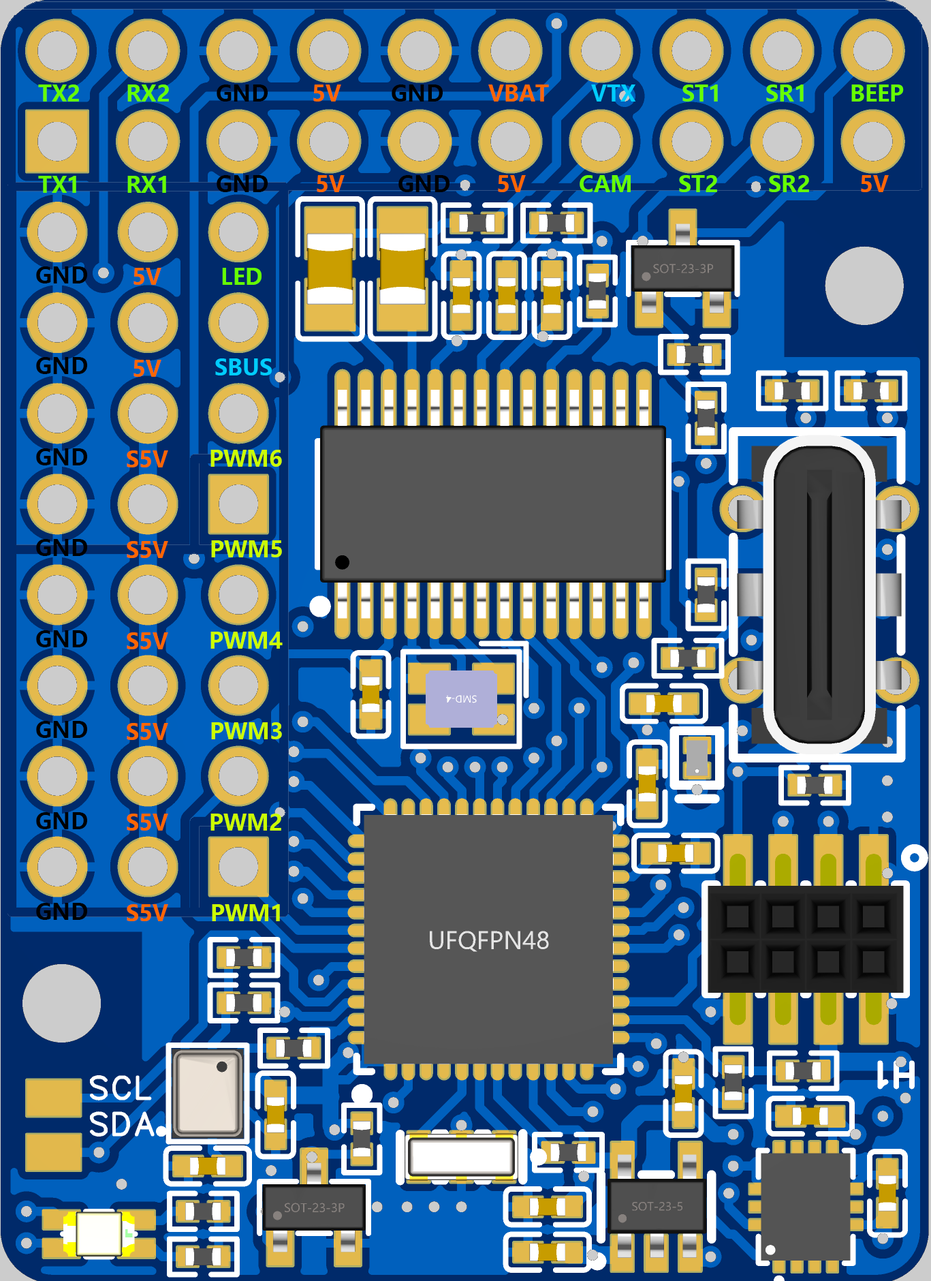
<style>
.page{position:relative;width:931px;height:1281px}
.page>*{position:absolute;margin:0}
.t1{font:21.8px "MicrosoftYaHei-Bold";color:#66ff00}
.t2{font:21.8px "MicrosoftYaHei-Bold";color:#000000}
.t3{font:21.8px "MicrosoftYaHei-Bold";color:#ff6600}
.t4{font:21.8px "MicrosoftYaHei-Bold";color:#00ccff}
.t5{font:21.8px "MicrosoftYaHei-Bold";color:#ccff00}
</style>
<div class="page">
<p class="t1" style="left:38px;top:84px;width:41px;height:17px">TX2</p>
<p class="t1" style="left:127px;top:84px;width:42px;height:17px">RX2</p>
<p class="t2" style="left:217px;top:84px;width:51px;height:17px">GND</p>
<p class="t3" style="left:313px;top:84px;width:28px;height:17px">5V</p>
<p class="t2" style="left:392px;top:84px;width:51px;height:17px">GND</p>
<p class="t3" style="left:488px;top:84px;width:61px;height:17px">VBAT</p>
<p class="t4" style="left:591px;top:84px;width:45px;height:17px">VTX</p>
<p class="t1" style="left:683px;top:84px;width:35px;height:17px">ST1</p>
<p class="t1" style="left:766px;top:84px;width:38px;height:17px">SR1</p>
<p class="t1" style="left:851px;top:84px;width:53px;height:17px">BEEP</p>
<p class="t1" style="left:38px;top:176px;width:38px;height:17px">TX1</p>
<p class="t1" style="left:127px;top:176px;width:39px;height:17px">RX1</p>
<p class="t2" style="left:217px;top:175px;width:51px;height:17px">GND</p>
<p class="t3" style="left:317px;top:175px;width:28px;height:17px">5V</p>
<p class="t2" style="left:398px;top:175px;width:52px;height:17px">GND</p>
<p class="t3" style="left:498px;top:175px;width:28px;height:17px">5V</p>
<p class="t1" style="left:580px;top:175px;width:51px;height:17px">CAM</p>
<p class="t1" style="left:679px;top:175px;width:38px;height:17px">ST2</p>
<p class="t1" style="left:769px;top:175px;width:40px;height:17px">SR2</p>
<p class="t3" style="left:861px;top:175px;width:28px;height:17px">5V</p>
<p class="t2" style="left:36px;top:266px;width:51px;height:17px">GND</p>
<p class="t3" style="left:134px;top:268px;width:27px;height:17px">5V</p>
<p class="t1" style="left:222px;top:268px;width:40px;height:17px">LED</p>
<p class="t2" style="left:36px;top:357px;width:51px;height:17px">GND</p>
<p class="t3" style="left:134px;top:360px;width:27px;height:17px">5V</p>
<p class="t4" style="left:215px;top:358px;width:57px;height:17px">SBUS</p>
<p class="t2" style="left:36px;top:448px;width:51px;height:17px">GND</p>
<p class="t5" style="left:210px;top:450px;width:72px;height:17px">PWM6</p>
<p class="t3" style="left:127px;top:450px;width:41px;height:17px">S5V</p>
<p class="t2" style="left:36px;top:539px;width:51px;height:17px">GND</p>
<p class="t3" style="left:127px;top:541px;width:41px;height:17px">S5V</p>
<p class="t5" style="left:211px;top:540px;width:71px;height:17px">PWM5</p>
<p class="t2" style="left:36px;top:630px;width:51px;height:17px">GND</p>
<p class="t3" style="left:127px;top:632px;width:41px;height:17px">S5V</p>
<p class="t5" style="left:210px;top:631px;width:73px;height:17px">PWM4</p>
<p class="t2" style="left:36px;top:721px;width:51px;height:17px">GND</p>
<p class="t3" style="left:127px;top:723px;width:41px;height:17px">S5V</p>
<p class="t5" style="left:211px;top:722px;width:71px;height:17px">PWM3</p>
<p class="t2" style="left:36px;top:812px;width:51px;height:17px">GND</p>
<p class="t3" style="left:127px;top:813px;width:41px;height:17px">S5V</p>
<p class="t5" style="left:210px;top:813px;width:71px;height:17px">PWM2</p>
<p class="t2" style="left:36px;top:903px;width:51px;height:17px">GND</p>
<p class="t3" style="left:127px;top:904px;width:41px;height:17px">S5V</p>
<p class="t5" style="left:212px;top:904px;width:68px;height:17px">PWM1</p>
</div>
